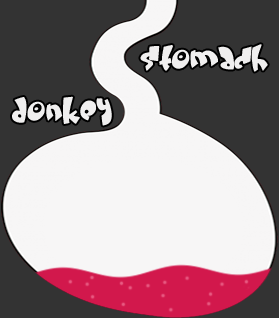
<style>
.page{position:relative;width:279px;height:318px;background:#333333}
.page>*{position:absolute;margin:0}
.t1{font:30px "Creamandsugar";color:#f0efef}
</style>
<div class="page">
<p class="t1" style="left:140px;top:44px;width:128px;height:28px">STOMACH</p>
<p class="t1" style="left:12px;top:96px;width:100px;height:30px">DONKEY</p>
</div>
